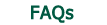
<style>
.page{position:relative;width:107px;height:25px;background:#ffffff}
.page>*{position:absolute;margin:0}
.t1{font:18px "Tahoma";letter-spacing:0.02em;color:#005941;font-weight:bold}
</style>
<div class="page">
<p class="t1" style="left:31px;top:5px;width:43px;height:18px">FAQs</p>
</div>
